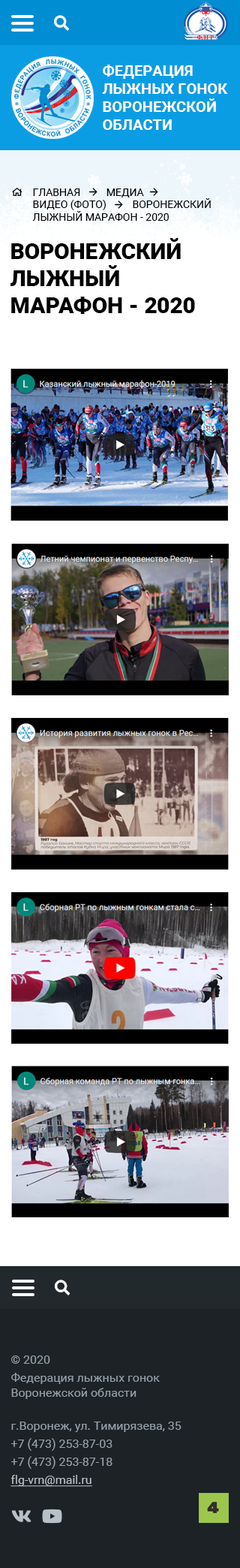
<style>
.page{position:relative;width:240px;height:1568px}
.page>*{position:absolute;margin:0}
.t1{font:15px "Roboto-Bold";color:#ffffff;text-transform:uppercase}
.t2{font:10.5px "Roboto-Regular";color:#000000;text-transform:uppercase}
.t3{font:22.5px "Roboto-Black";color:#000000;text-transform:uppercase}
.t4{font:12px/18px "Roboto-Regular";color:#94a1a9}
.t5{font:12px/15px "Roboto-Regular";color:#94a1a9}
.t6{font:12px/18px "Roboto-Regular";color:#b7c1c7;text-decoration:underline}
</style>
<div class="page">
<p class="t1" style="left:102px;top:65px;width:126px;height:65px">ФЕДЕРАЦИЯ <br>ЛЫЖНЫХ ГОНОК<br>воронежской <br>области</p>
<p class="t2" style="left:32px;top:188px;width:179px;height:33px">Главная          медиа          <br>видео (фото)          Воронежский <br>лыжный марафон - 2020</p>
<p class="t3" style="left:11px;top:238px;width:184px;height:76px">Воронежский <br>лыжный <br>марафон - 2020</p>
<p class="t4" style="left:11px;top:1355px;width:149px;height:44px">© 2020 <br>Федерация лыжных гонок <br><span class="t5">Воронежской области</span></p>
<p class="t4" style="left:11px;top:1422px;width:171px;height:65px">г.Воронеж, ул. Тимирязева, 35<br>+7 (473) 253-87-03<br>+7 (473) 253-87-18<br><span class="t6">flg-vrn@mail.ru</span></p>
</div>
